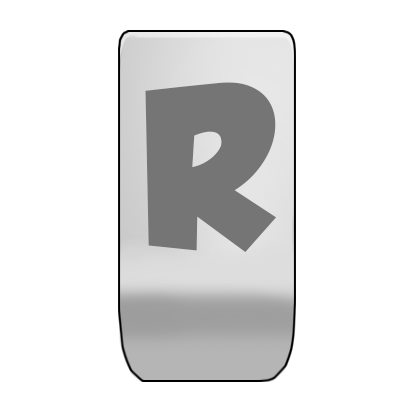
<style>
.page{position:relative;width:400px;height:400px;background:#ffffff}
.page>*{position:absolute;margin:0}
.t1{font:197.5px "GROBOLD";color:#757575}
</style>
<div class="page">
<p class="t1" style="left:145px;top:82px;width:132px;height:170px">R</p>
</div>
